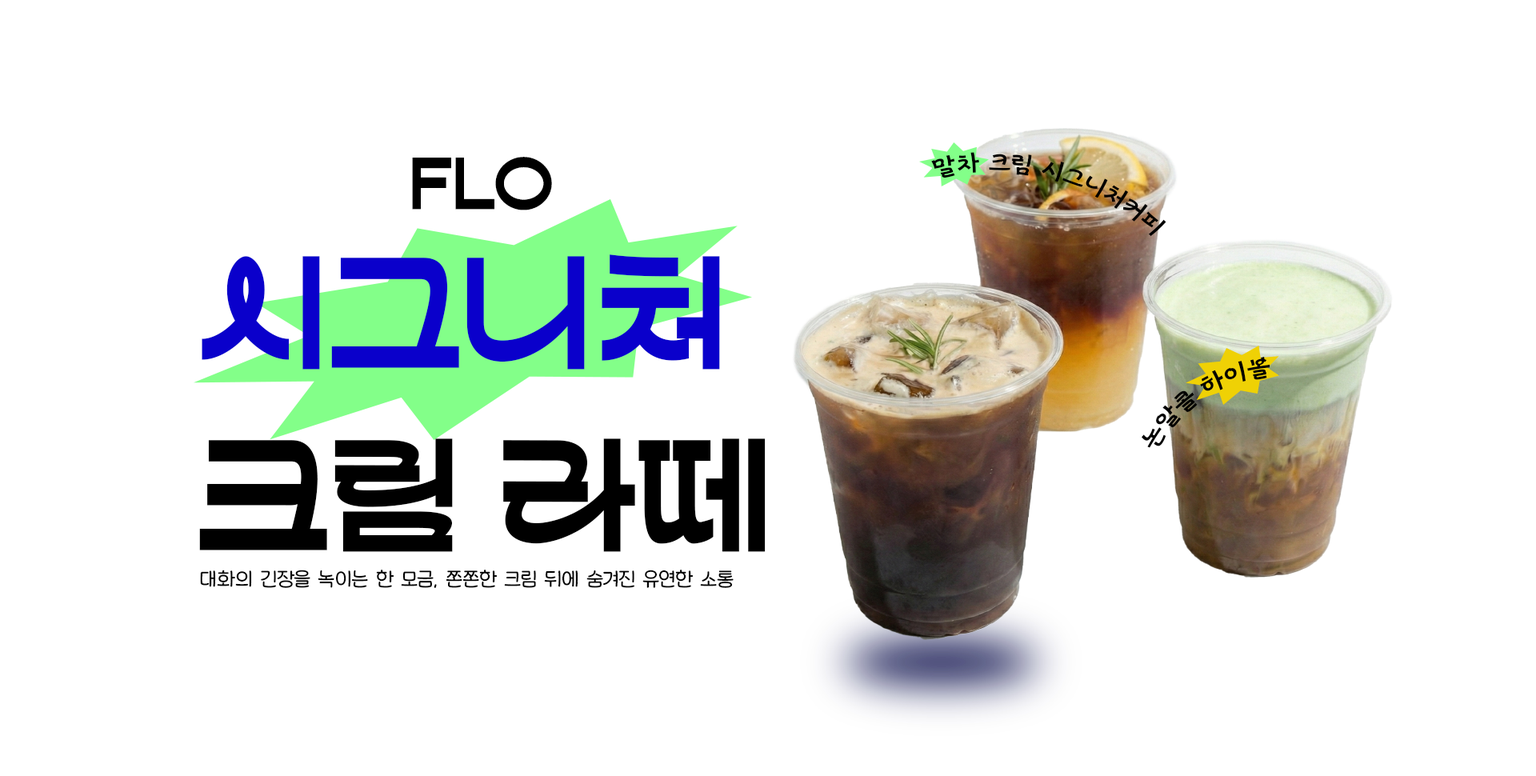
<style>
.page{position:relative;width:1536px;height:776px;background:#ffffff}
.page>*{position:absolute;margin:0}
.t1{font:80px "HSJandari-Regular";letter-spacing:0.01em;color:#000000}
.t2{font:24px "MapoBackpacking";letter-spacing:0.01em;color:#000000;scale:1.06 1}
.t3{font:152px "HSJandari-Regular";letter-spacing:0.01em;color:#000000}
.t4{font:152px "HSJandari-Regular";letter-spacing:0.01em;color:#0a00cb}
.t5{font:20.8px "HakgyoansimDunggeunmisoOTF-R";letter-spacing:0.01em;color:#000000}
</style>
<div class="page">
<p class="t1" style="left:412px;top:157px;width:140px;height:53px">FLO</p>
<p class="t2" style="left:931px;top:152px;width:236px;height:85px;rotate:15deg">말차 크림 시그니처커피</p>
<p class="t3" style="left:199px;top:254px;width:567px;height:298px"><span class="t4">시그니처 <br></span>크림 라떼</p>
<p class="t2" style="left:1142px;top:356px;width:129px;height:92px;rotate:-33deg">논알콜 하이볼</p>
<p class="t5" style="left:200px;top:570px;width:534px;height:18px">대화의 긴장을 녹이는 한 모금, 쫀쫀한 크림 뒤에 숨겨진 유연한 소통</p>
</div>
